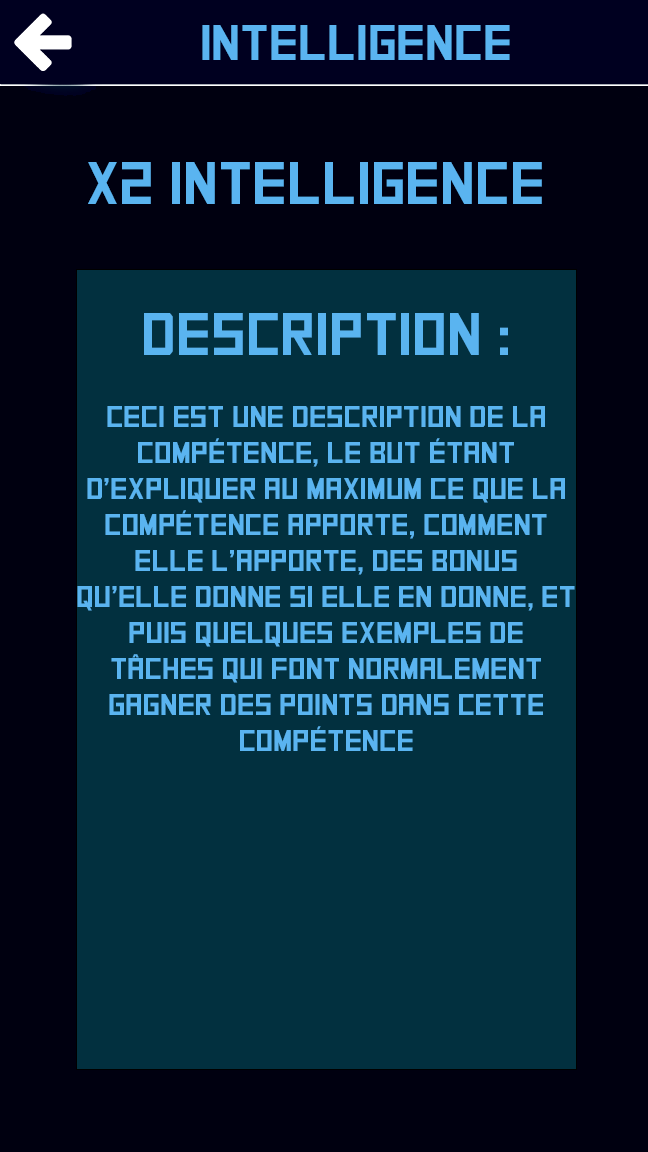
<style>
.page{position:relative;width:648px;height:1152px;background:#02303f}
.page>*{position:absolute;margin:0}
.t1{font:50px "SquareFont";color:#5ab4f0}
.t2{font:60px "SquareFont";color:#5ab4f0}
.t3{font:30px "SquareFont";color:#5ab4f0}
.t4{font:20px "SquareFont";color:#5ab4f0}
</style>
<div class="page">
<p class="t1" style="left:202px;top:25px;width:308px;height:35px">Intelligence</p>
<p class="t2" style="left:88px;top:162px;width:454px;height:42px">X2 Intelligence</p>
<p class="t3" style="left:77px;top:313px;width:498px;height:438px;text-align:center"><span class="t4"><br></span><span class="t2">Description :</span><br><br>CECI est une description de la compétence, le but étant d’expliquer au maximum ce que la compétence apporte, comment elle l’apporte, des bonus qu’elle donne si elle en donne, et puis quelques exemples de tâches qui font normalement gagner des points dans cette compétence</p>
</div>
